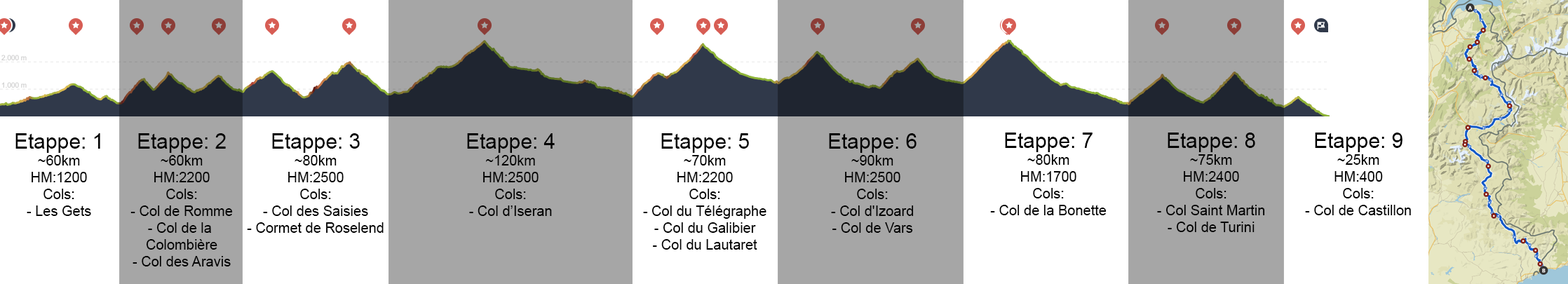
<style>
.page{position:relative;width:1568px;height:284px;background:#ffffff}
.page>*{position:absolute;margin:0}
.t1{font:14px "ArialMT";color:#000000}
.t2{font:21px "ArialMT";color:#000000}
</style>
<div class="page">
<p class="t1" style="left:15px;top:133px;width:85px;height:83px;text-align:center"><span class="t2">Etappe: 1<br></span>~60km<br>HM:1200<br>Cols:<br>- Les Gets</p>
<p class="t1" style="left:130px;top:133px;width:103px;height:133px;text-align:center"><span class="t2">Etappe: 2<br></span>~60km<br>HM:2200<br>Cols:<br>- Col de Romme<br>- Col de la <br>Colombière<br>- Col des Aravis</p>
<p class="t1" style="left:247px;top:133px;width:137px;height:100px;text-align:center"><span class="t2">Etappe: 3<br></span>~80km<br>HM:2500<br>Cols:<br>- Col des Saisies<br>- Cormet de Roselend</p>
<p class="t1" style="left:467px;top:133px;width:88px;height:83px;text-align:center"><span class="t2">Etappe: 4<br></span>~120km<br>HM:2500<br>Cols:<br>- Col d’Iseran</p>
<p class="t1" style="left:643px;top:133px;width:123px;height:117px;text-align:center"><span class="t2">Etappe: 5<br></span>~70km<br>HM:2200<br>Cols:<br>- Col du Télégraphe<br>- Col du Galibier<br>- Col du Lautaret</p>
<p class="t1" style="left:829px;top:133px;width:88px;height:100px;text-align:center"><span class="t2">Etappe: 6<br></span>~90km<br>HM:2500<br>Cols:<br>- Col d'Izoard<br>- Col de Vars</p>
<p class="t1" style="left:990px;top:133px;width:117px;height:82px;text-align:center"><span class="t2">Etappe: 7<br></span>~80km<br>HM:1700<br>Cols:<br>- Col de la Bonette</p>
<p class="t1" style="left:1157px;top:133px;width:108px;height:99px;text-align:center"><span class="t2">Etappe: 8<br></span>~75km<br>HM:2400<br>Cols:<br>- Col Saint Martin<br>- Col de Turini</p>
<p class="t1" style="left:1305px;top:133px;width:106px;height:82px;text-align:center"><span class="t2">Etappe: 9<br></span>~25km<br>HM:400<br>Cols:<br>- Col de Castillon</p>
</div>
